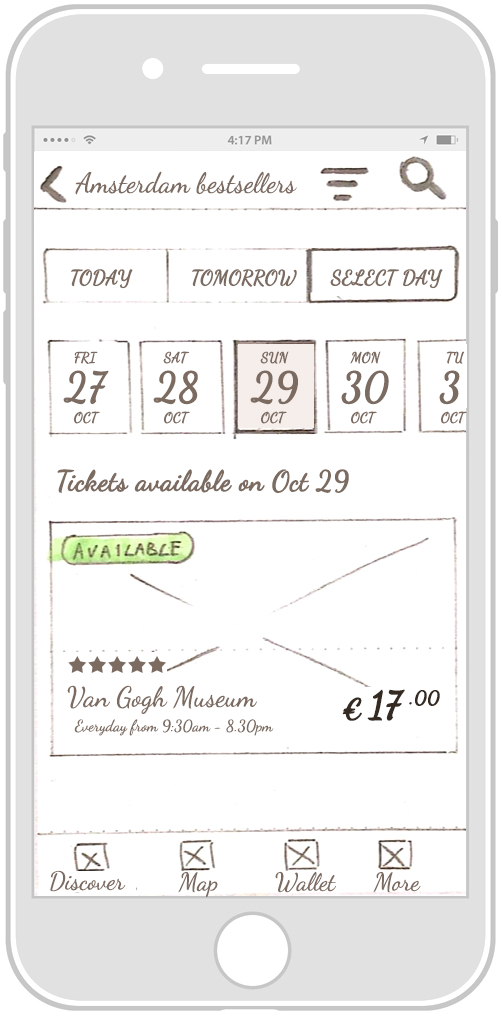
<style>
.page{position:relative;width:502px;height:1016px;background:#ffffff}
.page>*{position:absolute;margin:0}
.t1{font:28px "DancingScript-Regular";color:#7c6b61}
.t2{font:20px "DancingScript-Regular";color:#7c6b61;font-weight:bold}
.t3{font:14px "DancingScript-Regular";color:#7c6b61;font-weight:bold}
.t4{font:40px "DancingScript-Regular";color:#7c6b61;font-weight:bold}
.t5{font:28px "DancingScript-Regular";color:#7c6b61;font-weight:bold}
.t6{font:36.9px "DancingScript-Bold";color:#342a21;font-weight:bold}
.t7{font:27.9px "DancingScript-Bold";color:#342a21;font-weight:bold}
.t8{font:18.9px "DancingScript-Bold";color:#342a21;font-weight:bold}
.t9{font:16px "DancingScript-Regular";color:#7c6b61}
.t10{font:25px "DancingScript-Regular";color:#7c6b61}
</style>
<div class="page">
<p class="t1" style="left:75px;top:171px;width:222px;height:24px">Amsterdam bestsellers</p>
<p class="t2" style="left:71px;top:269px;width:62px;height:20px">TODAY</p>
<p class="t2" style="left:192px;top:269px;width:105px;height:18px">TOMORROW</p>
<p class="t2" style="left:330px;top:269px;width:113px;height:20px">SELECT DAY</p>
<p class="t3" style="left:74px;top:351px;width:24px;height:13px">FRI</p>
<p class="t3" style="left:163px;top:351px;width:27px;height:13px">SAT</p>
<p class="t3" style="left:260px;top:351px;width:29px;height:13px">SUN</p>
<p class="t3" style="left:350px;top:351px;width:31px;height:13px">MON</p>
<p class="t3" style="left:446px;top:351px;width:18px;height:13px">TU</p>
<p class="t4" style="left:63px;top:370px;width:46px;height:35px">27</p>
<p class="t4" style="left:153px;top:370px;width:45px;height:35px">28</p>
<p class="t4" style="left:250px;top:370px;width:48px;height:35px">29</p>
<p class="t4" style="left:341px;top:370px;width:48px;height:35px">30</p>
<p class="t4" style="left:439px;top:370px;width:21px;height:35px">3</p>
<p class="t3" style="left:74px;top:411px;width:26px;height:13px">OCT</p>
<p class="t3" style="left:164px;top:411px;width:26px;height:13px">OCT</p>
<p class="t3" style="left:261px;top:411px;width:26px;height:13px">OCT</p>
<p class="t3" style="left:351px;top:411px;width:26px;height:13px">OCT</p>
<p class="t3" style="left:441px;top:411px;width:26px;height:13px">OCT</p>
<p class="t5" style="left:57px;top:469px;width:292px;height:24px">Tickets available on Oct 29</p>
<p class="t1" style="left:67px;top:685px;width:190px;height:29px">Van Gogh Museum</p>
<p class="t6" style="left:367px;top:689px;width:38px;height:32px">17</p>
<p class="t7" style="left:342px;top:697px;width:20px;height:24px">€</p>
<p class="t8" style="left:409px;top:690px;width:31px;height:16px">.00</p>
<p class="t9" style="left:74px;top:719px;width:200px;height:17px">Everyday from 9:30am - 8.30pm</p>
<p class="t10" style="left:50px;top:870px;width:76px;height:22px">Discover</p>
<p class="t10" style="left:178px;top:871px;width:40px;height:27px">Map</p>
<p class="t10" style="left:275px;top:871px;width:61px;height:22px">Wallet</p>
<p class="t10" style="left:373px;top:871px;width:48px;height:22px">More</p>
</div>
